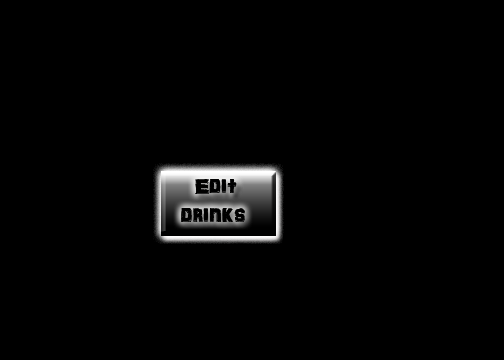
<style>
.page{position:relative;width:504px;height:360px;background:#000000}
.page>*{position:absolute;margin:0}
.t1{font:24px "ARDARLING";color:#000000}
</style>
<div class="page">
<p class="t1" style="left:181px;top:179px;width:64px;height:43px">Edit<br>  drinks</p>
</div>
